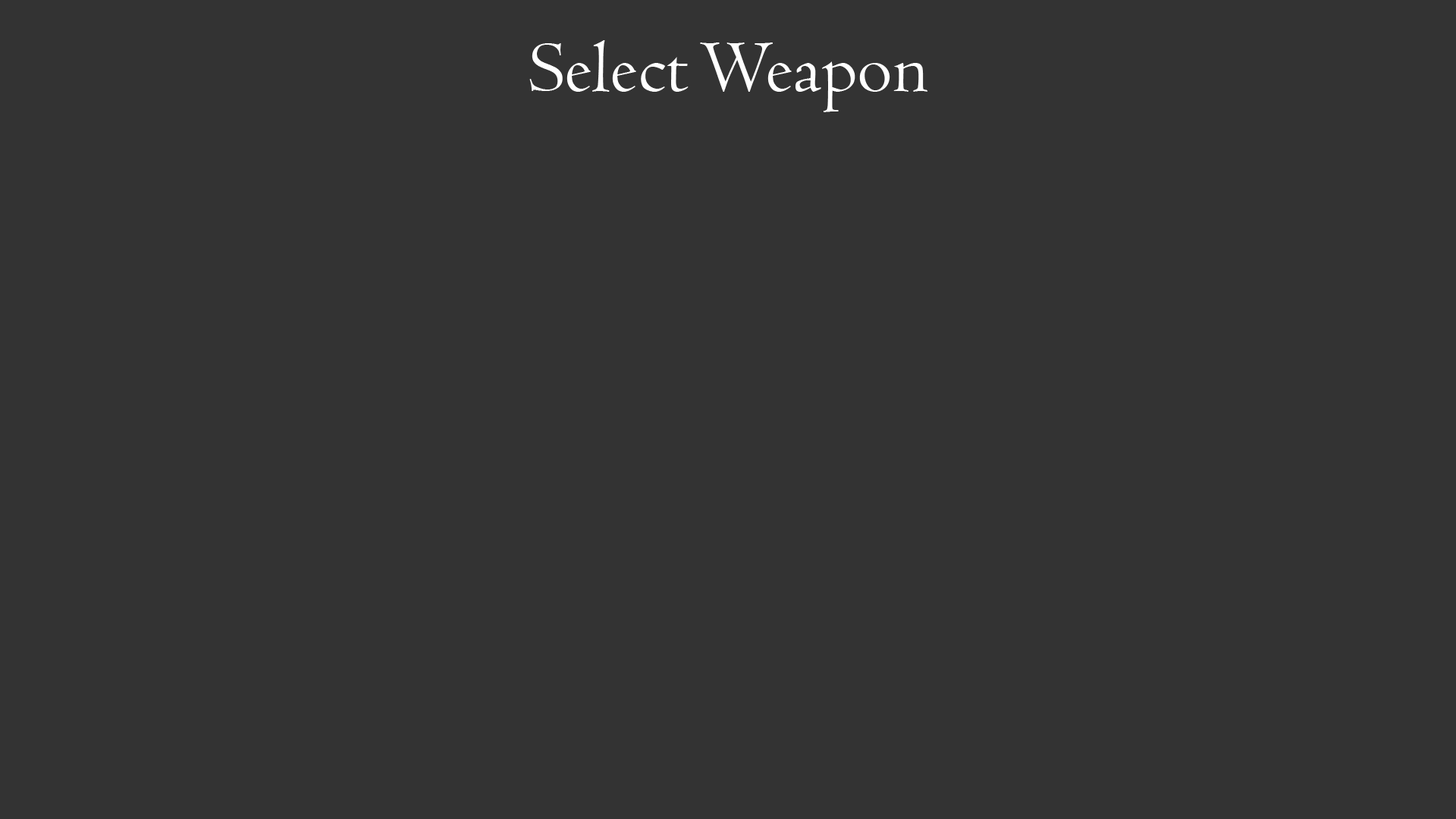
<style>
.page{position:relative;width:1456px;height:819px;background:#333333}
.page>*{position:absolute;margin:0}
.t1{font:75.8px "Centaur";color:#ffffff}
</style>
<div class="page">
<p class="t1" style="left:529px;top:40px;width:398px;height:72px">Select Weapon</p>
</div>
